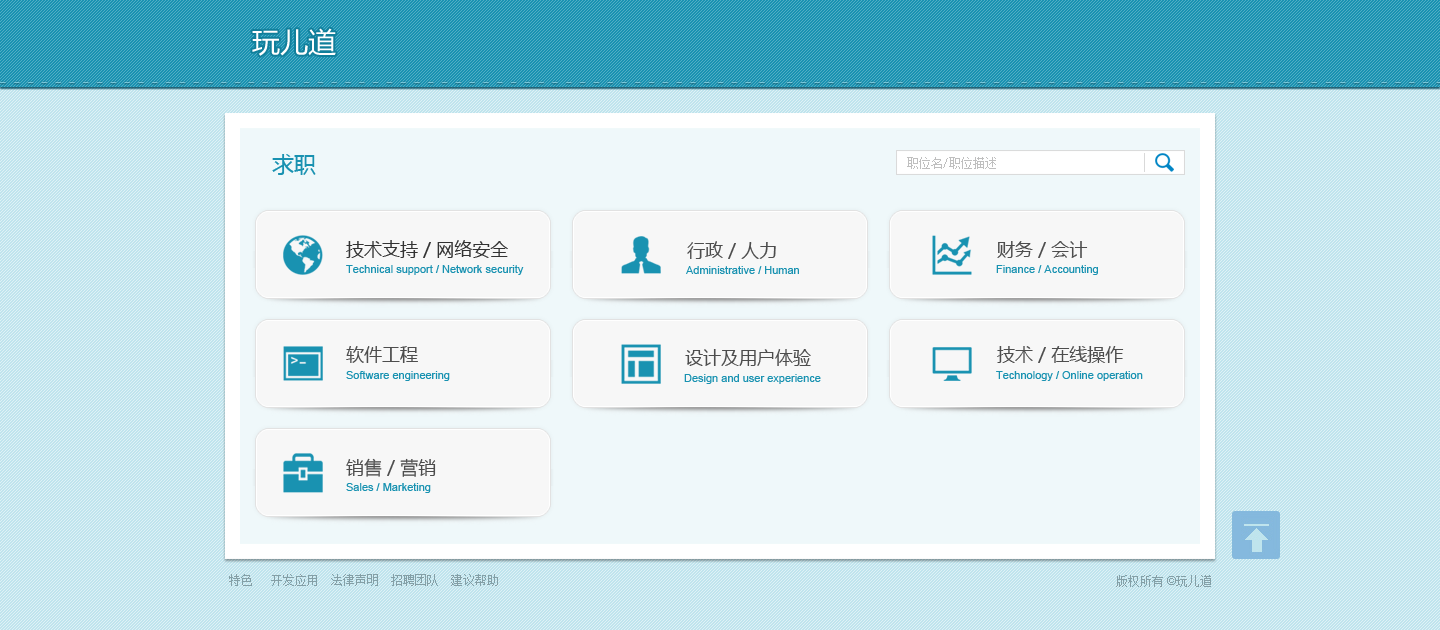
<style>
.page{position:relative;width:1440px;height:630px;background:#bfe4ed}
.page>*{position:absolute;margin:0}
.t1{font:28px "MicrosoftYaHei";color:#ffffff}
.t2{font:22px "MicrosoftYaHei";color:#1992b1}
.t3{font:12px "SimSun";color:#bfbfbf}
.t4{font:18px "MicrosoftYaHei";color:#333333}
.t5{font:18px "MicrosoftYaHei";color:#4d4d4d}
.t6{font:11px "ArialMT";color:#1992b1}
.t7{font:12px "SimSun";color:#849fa6}
.t8{font:12px "ArialMT";color:#849fa6}
</style>
<div class="page">
<p class="t1" style="left:252px;top:28px;width:84px;height:28px">玩儿道</p>
<p class="t2" style="left:272px;top:154px;width:44px;height:21px">求职</p>
<p class="t2" style="left:272px;top:154px;width:44px;height:21px">求职</p>
<p class="t3" style="left:907px;top:157px;width:89px;height:12px">职位名/职位描述</p>
<p class="t3" style="left:907px;top:157px;width:89px;height:12px">职位名/职位描述</p>
<p class="t4" style="left:346px;top:240px;width:162px;height:18px">技术支持 / 网络安全</p>
<p class="t4" style="left:346px;top:240px;width:162px;height:18px">技术支持 / 网络安全</p>
<p class="t5" style="left:687px;top:241px;width:89px;height:18px">行政 / 人力</p>
<p class="t5" style="left:687px;top:241px;width:89px;height:18px">行政 / 人力</p>
<p class="t5" style="left:997px;top:241px;width:91px;height:17px">财务 / 会计</p>
<p class="t5" style="left:997px;top:241px;width:91px;height:17px">财务 / 会计</p>
<p class="t6" style="left:346px;top:265px;width:178px;height:10px">Technical support / Network security</p>
<p class="t6" style="left:346px;top:265px;width:178px;height:10px">Technical support / Network security</p>
<p class="t6" style="left:686px;top:266px;width:113px;height:8px">Administrative / Human</p>
<p class="t6" style="left:686px;top:266px;width:113px;height:8px">Administrative / Human</p>
<p class="t6" style="left:996px;top:265px;width:102px;height:10px">Finance / Accounting</p>
<p class="t6" style="left:996px;top:265px;width:102px;height:10px">Finance / Accounting</p>
<p class="t5" style="left:346px;top:346px;width:72px;height:17px">软件工程</p>
<p class="t5" style="left:346px;top:346px;width:72px;height:17px">软件工程</p>
<p class="t5" style="left:685px;top:349px;width:126px;height:17px">设计及用户体验</p>
<p class="t5" style="left:685px;top:349px;width:126px;height:17px">设计及用户体验</p>
<p class="t5" style="left:997px;top:346px;width:127px;height:17px">技术 / 在线操作</p>
<p class="t5" style="left:997px;top:346px;width:127px;height:17px">技术 / 在线操作</p>
<p class="t6" style="left:346px;top:371px;width:104px;height:10px">Software engineering</p>
<p class="t6" style="left:346px;top:371px;width:104px;height:10px">Software engineering</p>
<p class="t6" style="left:684px;top:374px;width:137px;height:10px">Design and user experience</p>
<p class="t6" style="left:684px;top:374px;width:137px;height:10px">Design and user experience</p>
<p class="t6" style="left:996px;top:371px;width:147px;height:10px">Technology / Online operation</p>
<p class="t6" style="left:996px;top:371px;width:147px;height:10px">Technology / Online operation</p>
<p class="t5" style="left:346px;top:458px;width:90px;height:19px">销售 / 营销</p>
<p class="t5" style="left:346px;top:458px;width:90px;height:19px">销售 / 营销</p>
<p class="t6" style="left:346px;top:483px;width:85px;height:10px">Sales / Marketing</p>
<p class="t6" style="left:346px;top:483px;width:85px;height:10px">Sales / Marketing</p>
<p class="t7" style="left:229px;top:574px;width:269px;height:12px">特色   开发应用  法律声明  招聘团队  建议帮助</p>
<p class="t7" style="left:1116px;top:575px;width:95px;height:12px">版权所有<span class="t8"> ©</span>玩儿道</p>
</div>
